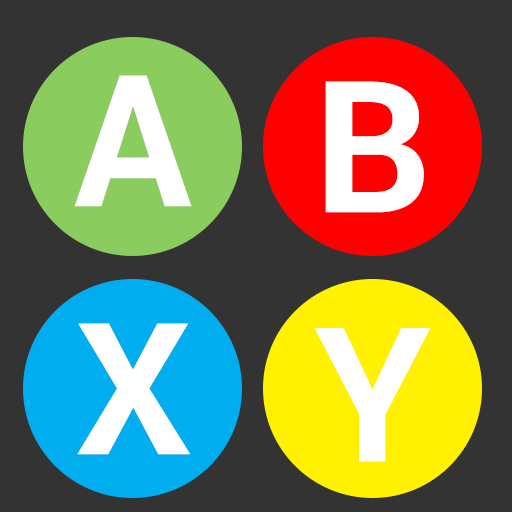
<style>
.page{position:relative;width:512px;height:512px;background:#333333}
.page>*{position:absolute;margin:0}
.t1{font:183.6px "Roboto-Bold";color:#ffffff}
.t2{font:187.2px "Roboto-Bold";color:#ffffff}
</style>
<div class="page">
<p class="t1" style="left:74px;top:75px;width:118px;height:132px">A</p>
<p class="t1" style="left:325px;top:81px;width:99px;height:132px">B</p>
<p class="t1" style="left:77px;top:323px;width:114px;height:132px">X</p>
<p class="t2" style="left:314px;top:328px;width:117px;height:134px">Y</p>
</div>
